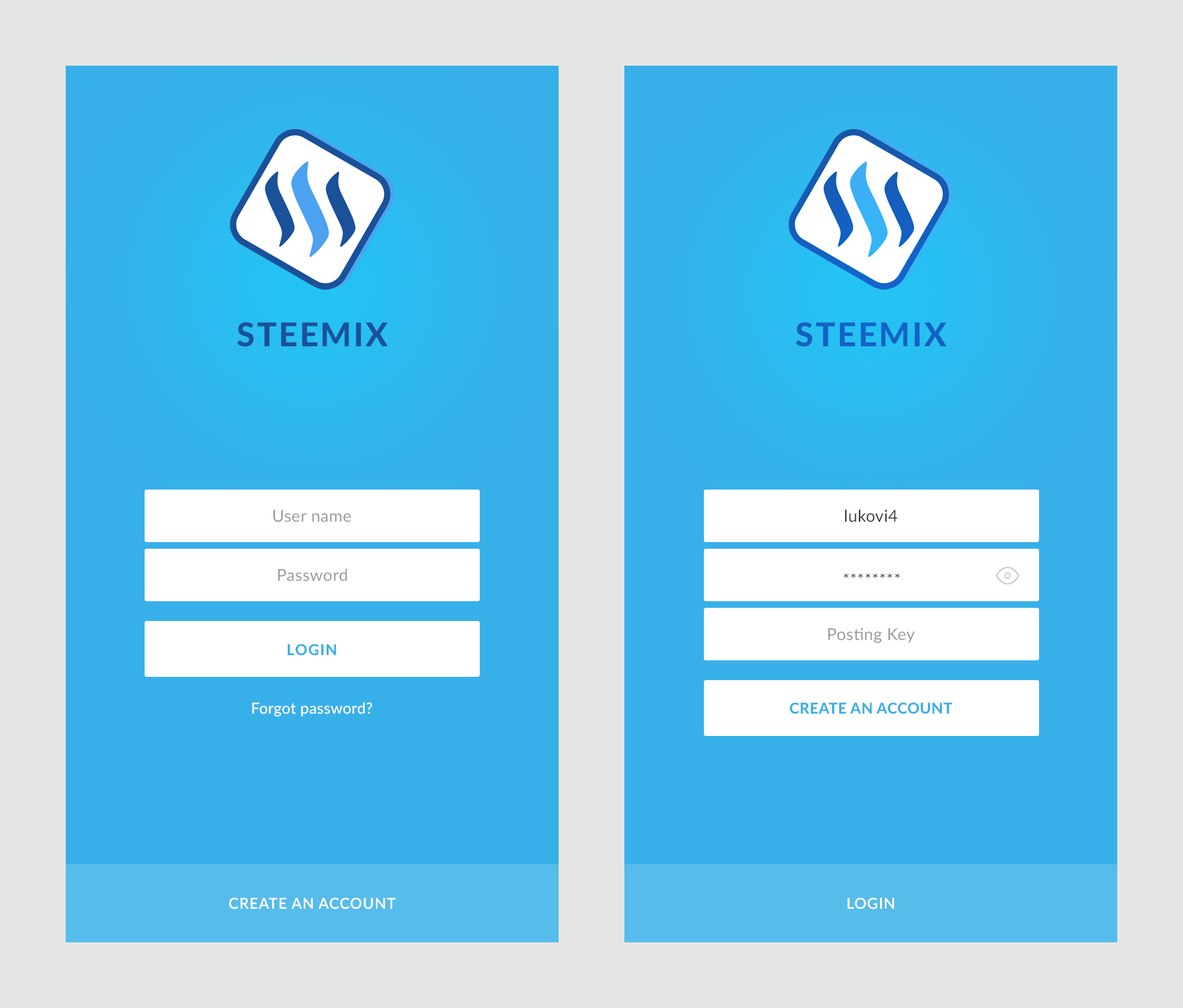
<style>
.page{position:relative;width:1183px;height:1008px;background:#e5e5e5}
.page>*{position:absolute;margin:0}
.t1{font:32.9px "Lato-Heavy";letter-spacing:0.06em;color:#1b5199;text-transform:uppercase}
.t2{font:32.9px "Lato-Heavy";letter-spacing:0.06em;color:#1362c6;text-transform:uppercase}
.t3{font:16.4px "Lato-Regular";letter-spacing:0.02em;color:#999999}
.t4{font:16.4px "Lato-Regular";letter-spacing:0.02em;color:#333333}
.t5{font:15.1px "Lato-Heavy";letter-spacing:0.06em;color:#37b0e9;text-transform:uppercase}
.t6{font:15.1px "Lato-Regular";letter-spacing:0.02em;color:#ffffff}
.t7{font:15.1px "Lato-Heavy";letter-spacing:0.02em;color:#37b0e9;text-transform:uppercase}
.t8{font:15.1px "Lato-Semibold";letter-spacing:0.04em;color:#ffffff;text-transform:uppercase}
</style>
<div class="page">
<p class="t1" style="left:237px;top:322px;width:151px;height:25px">steemix</p>
<p class="t2" style="left:796px;top:322px;width:150px;height:25px">steemix</p>
<p class="t3" style="left:273px;top:510px;width:78px;height:12px">User name</p>
<p class="t4" style="left:844px;top:509px;width:54px;height:13px">lukovi4</p>
<p class="t3" style="left:278px;top:568px;width:69px;height:14px">Password</p>
<p class="t4" style="left:843px;top:573px;width:57px;height:6px">********</p>
<p class="t3" style="left:828px;top:628px;width:87px;height:15px">Posting Key</p>
<p class="t5" style="left:287px;top:644px;width:49px;height:12px">LogIn</p>
<p class="t6" style="left:252px;top:702px;width:121px;height:15px">Forgot password?</p>
<p class="t7" style="left:789px;top:702px;width:163px;height:12px">Create an account</p>
<p class="t8" style="left:229px;top:898px;width:167px;height:12px">Create an account</p>
<p class="t8" style="left:847px;top:898px;width:47px;height:12px">Login</p>
</div>
